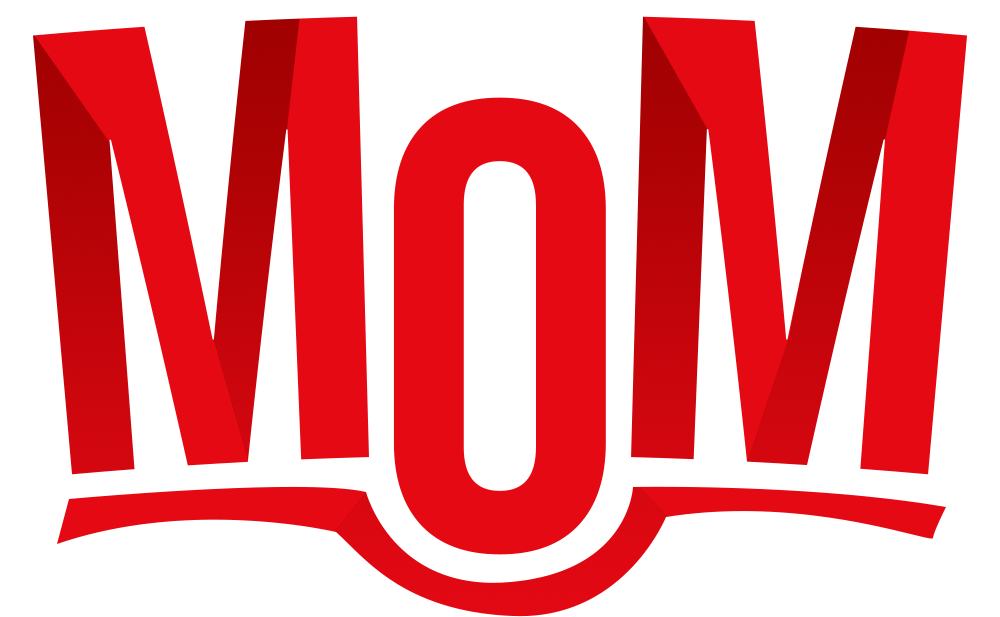
<style>
.page{position:relative;width:1000px;height:617px;background:#ffffff}
.page>*{position:absolute;margin:0}
.t1{font:634.3px "BebasNeue-Regular";color:#e50914}
</style>
<div class="page">
<p class="t1" style="left:33px;top:16px;width:935px;height:459px">M  M</p>
<p class="t1" style="left:393px;top:97px;width:213px;height:458px">o</p>
</div>
